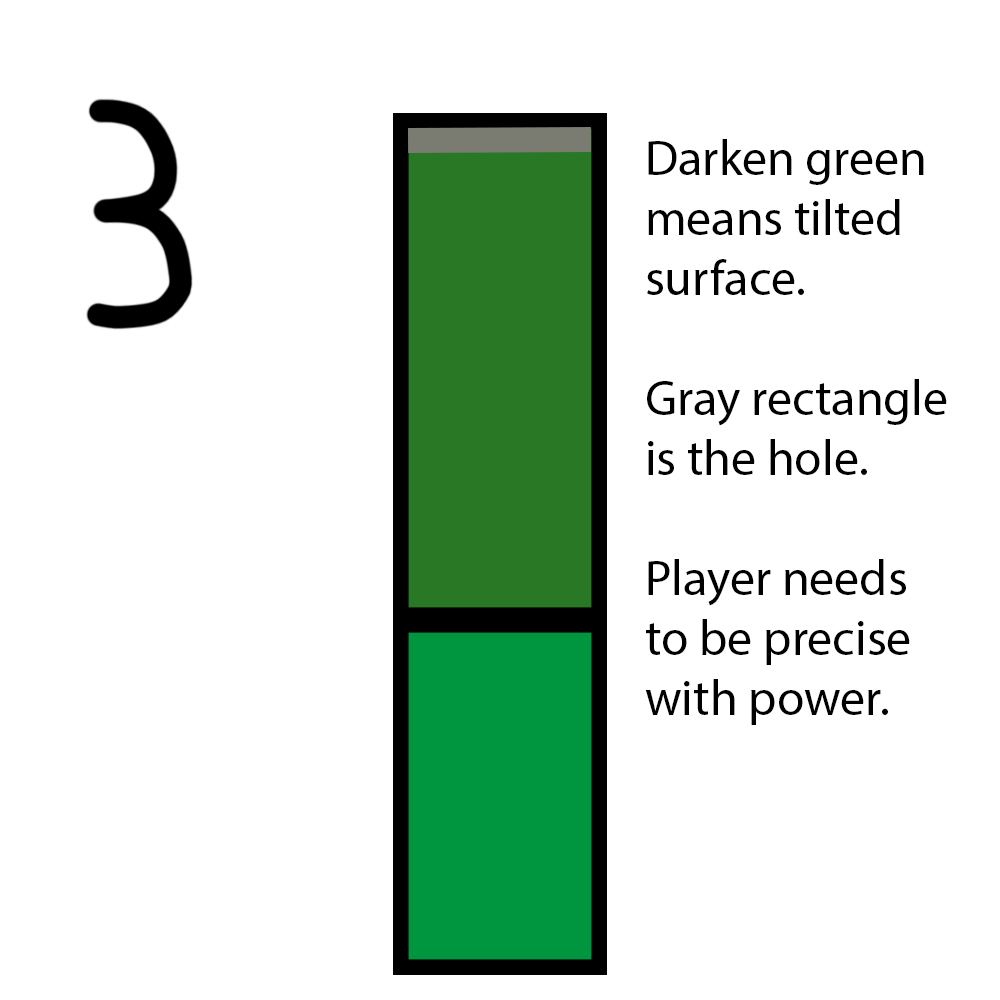
<style>
.page{position:relative;width:1000px;height:1000px;background:#ffffff}
.page>*{position:absolute;margin:0}
.t1{font:50px "MyriadPro-Regular";color:#000000}
</style>
<div class="page">
<p class="t1" style="left:645px;top:139px;width:302px;height:586px">Darken green means tilted surface.<br><br>Gray rectangle is the hole.<br><br>Player needs to be precise with power.</p>
</div>
